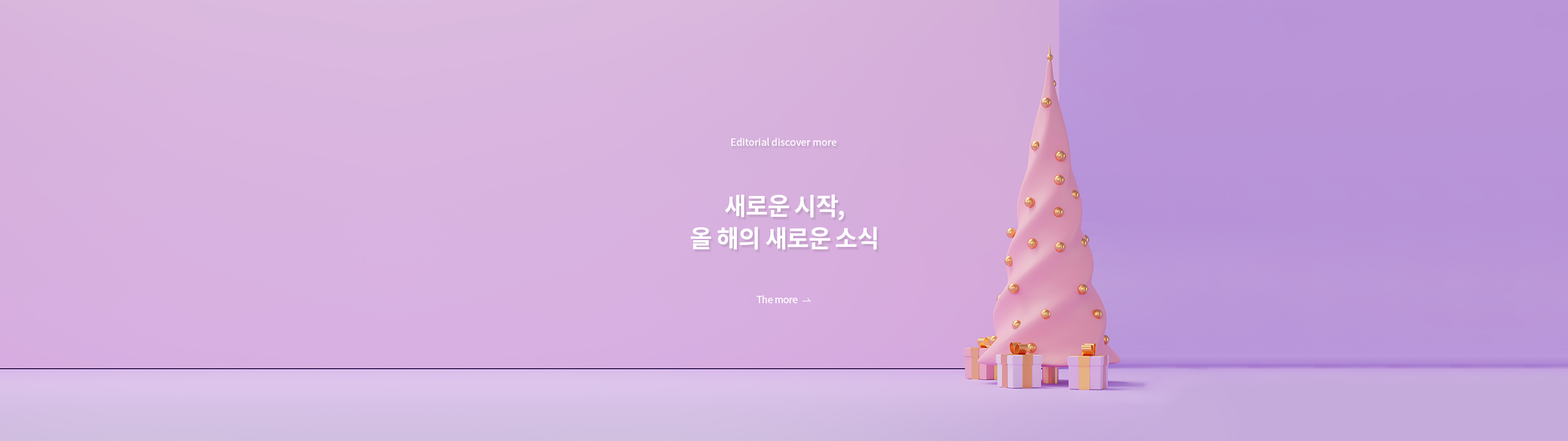
<style>
.page{position:relative;width:1568px;height:441px}
.page>*{position:absolute;margin:0}
.t1{font:9.8px "NotoSansKR-Regular";color:#ffffff}
.t2{font:24.5px/32.7px "NotoSansKR-Bold";letter-spacing:-0.03em;color:#ffffff}
.t3{font:9.8px "NotoSansKR-Regular";letter-spacing:-0.03em;color:#ffffff}
</style>
<div class="page">
<p class="t1" style="left:731px;top:137px;width:106px;height:9px">Editorial discover more</p>
<p class="t2" style="left:690px;top:194px;width:187px;height:56px;text-align:center">새로운 시작,<br>올 해의 새로운 소식</p>
<p class="t3" style="left:756px;top:295px;width:41px;height:8px">The more</p>
</div>
